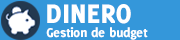
<style>
.page{position:relative;width:180px;height:40px;background:#3497da}
.page>*{position:absolute;margin:0}
.t1{font:29.5px "Delicious-Heavy";color:#ffffff}
.t2{font:14px "Delicious-Heavy";color:#ffffff}
</style>
<div class="page">
<p class="t1" style="left:47px;top:4px;width:84px;height:20px">DINERO</p>
<p class="t2" style="left:46px;top:27px;width:102px;height:13px">Gestion de budget</p>
</div>
